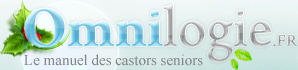
<style>
.page{position:relative;width:298px;height:70px}
.page>*{position:absolute;margin:0}
.t1{font:60px "ArnoPro-Regular"}
.t2{font:60px "ArnoPro-Bold"}
.t3{font:18px "ArnoPro-Regular"}
.t4{font:15px "TimesNewRomanPSMT";color:#848484}
</style>
<div class="page">
<p class="t1" style="left:25px;top:5px;width:273px;height:57px"><span class="t2">Omni</span>logie<span class="t3">.FR</span></p>
<p class="t1" style="left:25px;top:5px;width:273px;height:57px"><span class="t2">Omni</span>logie<span class="t3">.FR</span></p>
<p class="t1" style="left:25px;top:5px;width:273px;height:57px"><span class="t2">Omni</span>logie<span class="t3">.FR</span></p>
<p class="t1" style="left:25px;top:5px;width:273px;height:57px"><span class="t2">Omni</span>logie<span class="t3">.FR</span></p>
<p class="t4" style="left:24px;top:54px;width:179px;height:12px">Le manuel des castors seniors</p>
</div>
